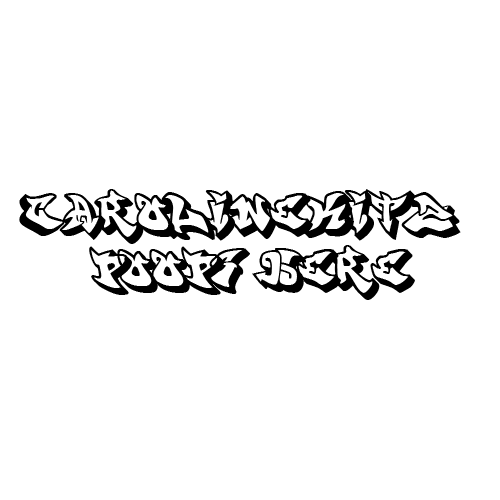
<style>
.page{position:relative;width:500px;height:500px;background:#ffffff}
.page>*{position:absolute;margin:0}
.t1{font:46.9px "graffonti.3Ddrop";letter-spacing:-0.02em;color:#000000}
</style>
<div class="page">
<p class="t1" style="left:19px;top:189px;width:442px;height:111px;text-align:center">Carolinekitz <br>poops here</p>
</div>
